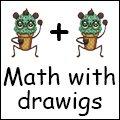
<style>
.page{position:relative;width:120px;height:120px;background:#ffffff}
.page>*{position:absolute;margin:0}
.t1{font:44px "ComicSansMS";color:#000000}
.t2{font:24px "ComicSansMS";color:#000000}
</style>
<div class="page">
<p class="t1" style="left:50px;top:23px;width:19px;height:18px">+</p>
<p class="t2" style="left:3px;top:66px;width:113px;height:20px">Math with</p>
<p class="t2" style="left:18px;top:90px;width:84px;height:26px">drawigs</p>
</div>
